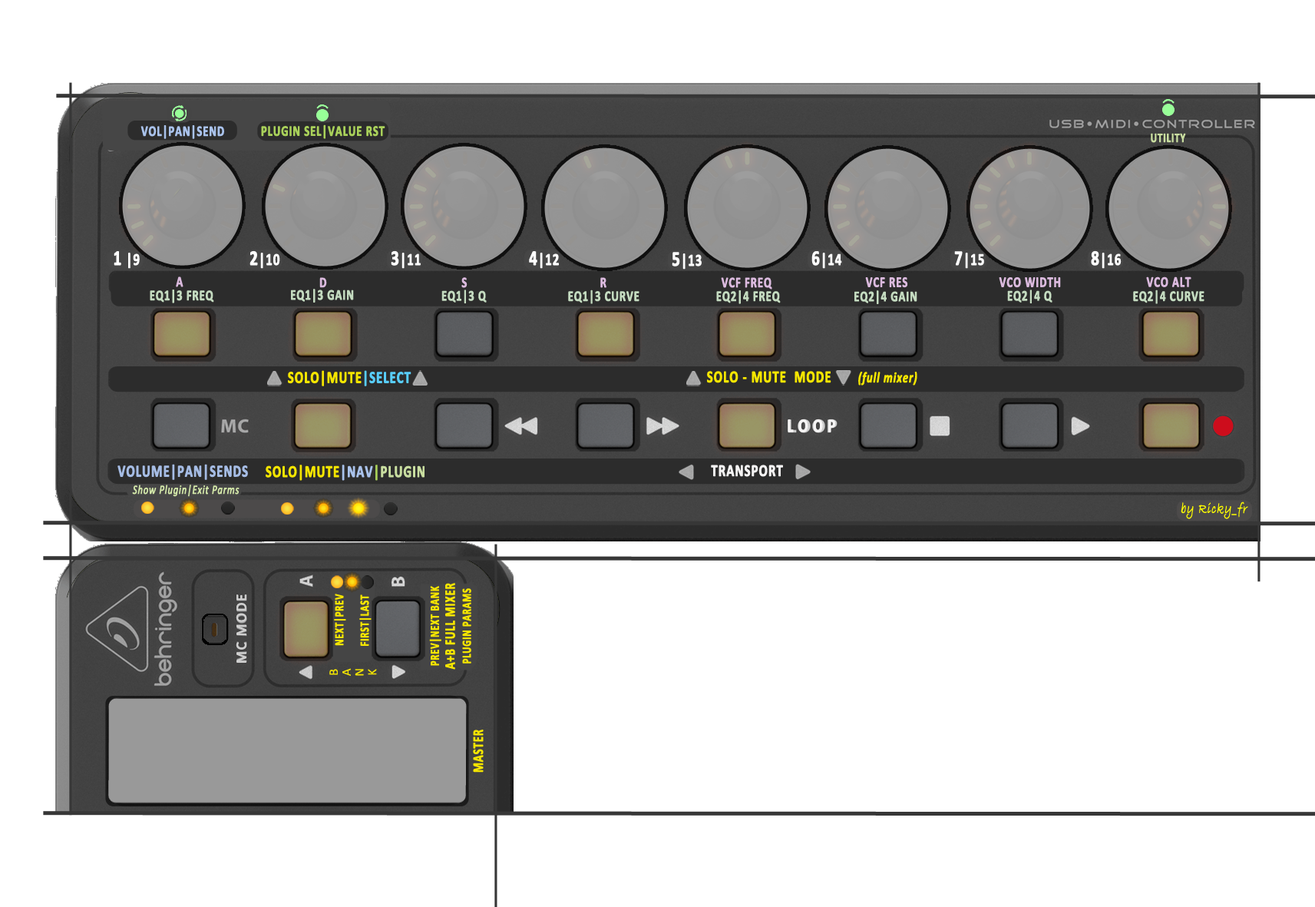
<style>
.page{position:relative;width:1315px;height:907px;background:#ffffff}
.page>*{position:absolute;margin:0}
.t1{font:14.8px "Calibri-Bold";letter-spacing:0.04em;color:#a9c2eb;font-weight:bold;scale:0.76 1}
.t2{font:14.8px "Calibri-Bold";letter-spacing:0.04em;color:#a9d15a;font-weight:bold;scale:0.76 1}
.t3{font:13.1px "Calibri-Bold";letter-spacing:0.04em;color:#c9dea0;font-weight:bold;scale:0.76 1}
.t4{font:16.9px "Calibri-Bold";letter-spacing:0.04em;color:#ffffff;font-weight:bold;scale:0.76 1}
.t5{font:21.1px "Calibri-Bold";letter-spacing:0.04em;color:#ffffff;font-weight:bold;scale:0.76 1}
.t6{font:14.8px "Calibri-Bold";letter-spacing:0.04em;color:#dbbade;font-weight:bold;scale:0.76 1}
.t7{font:14.8px "Calibri-Bold";letter-spacing:0.04em;color:#c4dbc0;font-weight:bold;scale:0.76 1}
.t8{font:16.9px "Calibri-Bold";letter-spacing:0.04em;color:#f4e500;font-weight:bold;scale:0.76 1}
.t9{font:16.9px "Calibri-Bold";letter-spacing:0.04em;color:#58cdf9;font-weight:bold;scale:0.76 1}
.t10{font:14.8px "Calibri-BoldItalic";letter-spacing:0.04em;color:#f4e500;font-weight:bold;scale:0.76 1}
.t11{font:19px "Calibri-Bold";letter-spacing:0.04em;color:#f5f4f4;font-weight:bold;scale:0.75 1}
.t12{font:16.9px "Calibri-Bold";letter-spacing:0.04em;color:#a5bce4;font-weight:bold;scale:0.76 1}
.t13{font:16.9px "Calibri-Bold";letter-spacing:0.04em;color:#a9c2eb;font-weight:bold;scale:0.76 1}
.t14{font:16.9px "Calibri-Bold";letter-spacing:0.04em;color:#a7ce58;font-weight:bold;scale:0.76 1}
.t15{font:16.9px "Calibri-Bold";letter-spacing:0.04em;color:#c9dea0;font-weight:bold;scale:0.76 1}
.t16{font:16.9px "Calibri-Bold";letter-spacing:0.04em;color:#f5f4f4;font-weight:bold;scale:0.76 1}
.t17{font:12.7px "Calibri-Italic";letter-spacing:0.04em;color:#d4e8aa;font-weight:bold;scale:0.76 1}
.t18{font:14.8px "BradleyHandITC";letter-spacing:0.04em;color:#ffff00;font-weight:bold;font-style:italic;scale:0.76 1}
.t19{font:12.7px "Calibri-Bold";letter-spacing:0.04em;color:#f4e500;font-weight:bold;scale:0.76 1}
.t20{font:12.7px/16px "Calibri-Bold";letter-spacing:0.04em;color:#f4e500;font-weight:bold;scale:0.76 1}
.t21{font:14.8px/16px "Calibri-Bold";letter-spacing:0.04em;color:#f4e500;font-weight:bold;scale:0.76 1}
.t22{font:14.8px "Calibri";letter-spacing:0.075em;color:#cfcfcf;font-weight:bold;scale:0.97 1}
.t23{font:12.8px "Calibri";letter-spacing:0.005em;color:#f4e500}
.t24{font:14.8px "Calibri-Bold";letter-spacing:0.04em;color:#f4e500;font-weight:bold;scale:0.76 1}
</style>
<div class="page">
<p class="t1" style="left:140px;top:125px;width:84px;height:14px">VOL|PAN|SEND</p>
<p class="t2" style="left:261px;top:124px;width:124px;height:15px">PLUGIN SEL|VALUE RST</p>
<p class="t3" style="left:1151px;top:133px;width:35px;height:10px">UTILITY</p>
<p class="t4" style="left:114px;top:251px;width:26px;height:18px"><span class="t5">1</span> |9</p>
<p class="t4" style="left:250px;top:250px;width:30px;height:19px"><span class="t5">2</span>|10</p>
<p class="t4" style="left:391px;top:250px;width:30px;height:19px"><span class="t5">3</span>|11</p>
<p class="t4" style="left:529px;top:251px;width:30px;height:18px"><span class="t5">4</span>|12</p>
<p class="t4" style="left:672px;top:252px;width:30px;height:17px"><span class="t5">5</span>|13</p>
<p class="t4" style="left:811px;top:251px;width:31px;height:18px"><span class="t5">6</span>|14</p>
<p class="t4" style="left:954px;top:251px;width:30px;height:18px"><span class="t5">7</span>|15</p>
<p class="t4" style="left:1091px;top:250px;width:31px;height:19px"><span class="t5">8</span>|16</p>
<p class="t6" style="left:176px;top:276px;width:7px;height:11px">A</p>
<p class="t6" style="left:319px;top:277px;width:8px;height:11px">D</p>
<p class="t6" style="left:461px;top:277px;width:7px;height:11px">S</p>
<p class="t6" style="left:600px;top:277px;width:7px;height:11px">R</p>
<p class="t6" style="left:721px;top:277px;width:51px;height:12px">VCF FREQ</p>
<p class="t6" style="left:865px;top:276px;width:43px;height:12px">VCF RES</p>
<p class="t6" style="left:999px;top:276px;width:62px;height:12px">VCO WIDTH</p>
<p class="t6" style="left:1146px;top:276px;width:46px;height:11px">VCO ALT</p>
<p class="t7" style="left:150px;top:289px;width:64px;height:14px">EQ1|3 FREQ</p>
<p class="t7" style="left:291px;top:289px;width:63px;height:13px">EQ1|3 GAIN</p>
<p class="t7" style="left:441px;top:289px;width:46px;height:14px">EQ1|3 Q</p>
<p class="t7" style="left:568px;top:289px;width:72px;height:15px">EQ1|3 CURVE</p>
<p class="t7" style="left:716px;top:290px;width:65px;height:14px">EQ2|4 FREQ</p>
<p class="t7" style="left:854px;top:290px;width:63px;height:14px">EQ2|4 GAIN</p>
<p class="t7" style="left:1007px;top:289px;width:46px;height:14px">EQ2|4 Q</p>
<p class="t7" style="left:1133px;top:289px;width:72px;height:15px">EQ2|4 CURVE</p>
<p class="t8" style="left:288px;top:370px;width:124px;height:16px">SOLO|MUTE<span class="t9">|SELECT</span></p>
<p class="t8" style="left:706px;top:371px;width:211px;height:14px">SOLO - MUTE  MODE       <span class="t10">(full mixer)</span></p>
<p class="t11" style="left:788px;top:419px;width:48px;height:13px">L O O P</p>
<p class="t12" style="left:117px;top:464px;width:131px;height:16px">VOLUME|PAN|SENDS</p>
<p class="t8" style="left:266px;top:464px;width:159px;height:17px">SOLO|MUTE<span class="t13">|NAV</span><span class="t14">|</span><span class="t15">PLUGIN</span></p>
<p class="t16" style="left:711px;top:464px;width:72px;height:13px">TRANSPORT</p>
<p class="t17" style="left:132px;top:484px;width:108px;height:13px">Show Plugin|Exit Parms</p>
<p class="t18" style="left:1181px;top:501px;width:67px;height:18px">by Ricky_fr</p>
<p class="t19" style="left:334px;top:593px;width:12px;height:53px;rotate:-90deg">NEXT|PREV</p>
<p class="t20" style="left:429px;top:583px;width:42px;height:86px;text-align:center;rotate:-90deg">PREV|NEXT BANK<br><span class="t21">A+B FULL MIXER<br></span>PLUGIN PARAMS</p>
<p class="t22" style="left:236px;top:594px;width:10px;height:69px;rotate:-90deg">MC MODE</p>
<p class="t19" style="left:359px;top:594px;width:13px;height:52px;rotate:-90deg">FIRST|LAST</p>
<p class="t23" style="left:329px;top:668px;width:48px;height:8px;rotate:-90deg">BANK</p>
<p class="t24" style="left:473px;top:729px;width:11px;height:43px;rotate:-90deg">MASTER</p>
</div>
